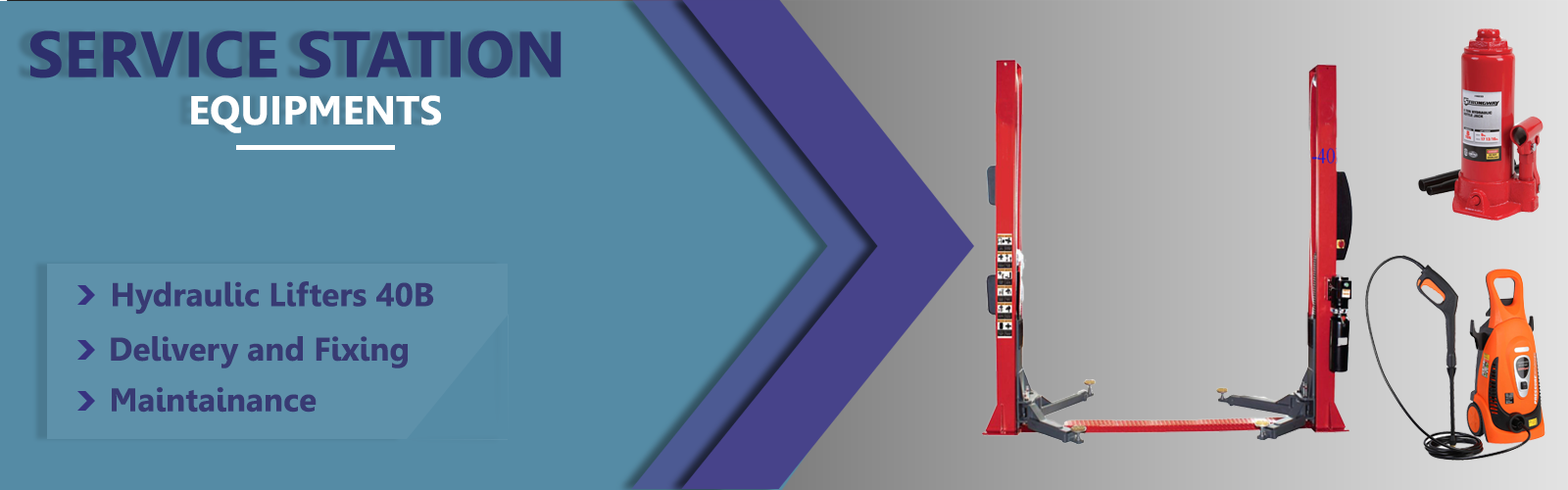
<style>
.page{position:relative;width:1568px;height:490px;background:#558ba5}
.page>*{position:absolute;margin:0}
.t1{font:64.7px "Leelawadee-Bold";color:#2d2f6c}
.t2{font:40.5px "Leelawadee-Bold";color:#ffffff}
.t3{font:32.7px "Leelawadee-Bold";color:#2d2f6c}
</style>
<div class="page">
<p class="t1" style="left:29px;top:30px;width:533px;height:48px">SERVICE STATION</p>
<p class="t2" style="left:191px;top:95px;width:250px;height:38px">EQUIPMENTS</p>
<p class="t3" style="left:113px;top:281px;width:321px;height:34px">Hydraulic Lifters 40B</p>
<p class="t3" style="left:111px;top:336px;width:297px;height:32px">Delivery and Fixing</p>
<p class="t3" style="left:112px;top:387px;width:205px;height:26px">Maintainance</p>
</div>
